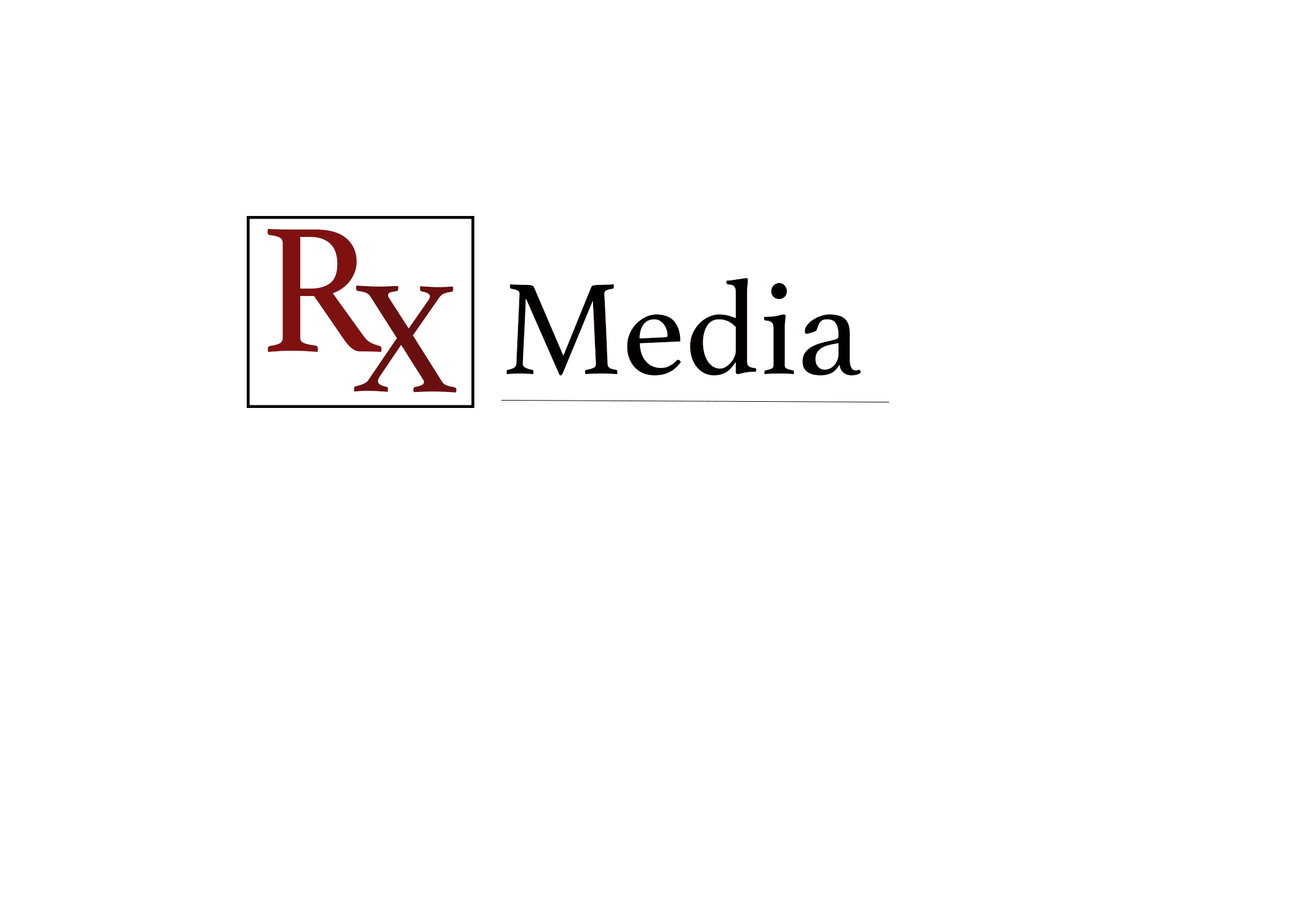
<style>
.page{position:relative;width:1292px;height:923px;background:#ffffff}
.page>*{position:absolute;margin:0}
.t1{font:186.7px "Athelas-Regular";color:#7f1111}
.t2{font:136.4px "Athelas-Regular";color:#050000}
.t3{font:160.6px "Athelas-Regular";color:#6a0f0f}
</style>
<div class="page">
<p class="t1" style="left:267px;top:229px;width:115px;height:123px">R</p>
<p class="t2" style="left:506px;top:278px;width:355px;height:97px">Media</p>
<p class="t3" style="left:354px;top:285px;width:103px;height:108px;rotate:1deg">X</p>
</div>
